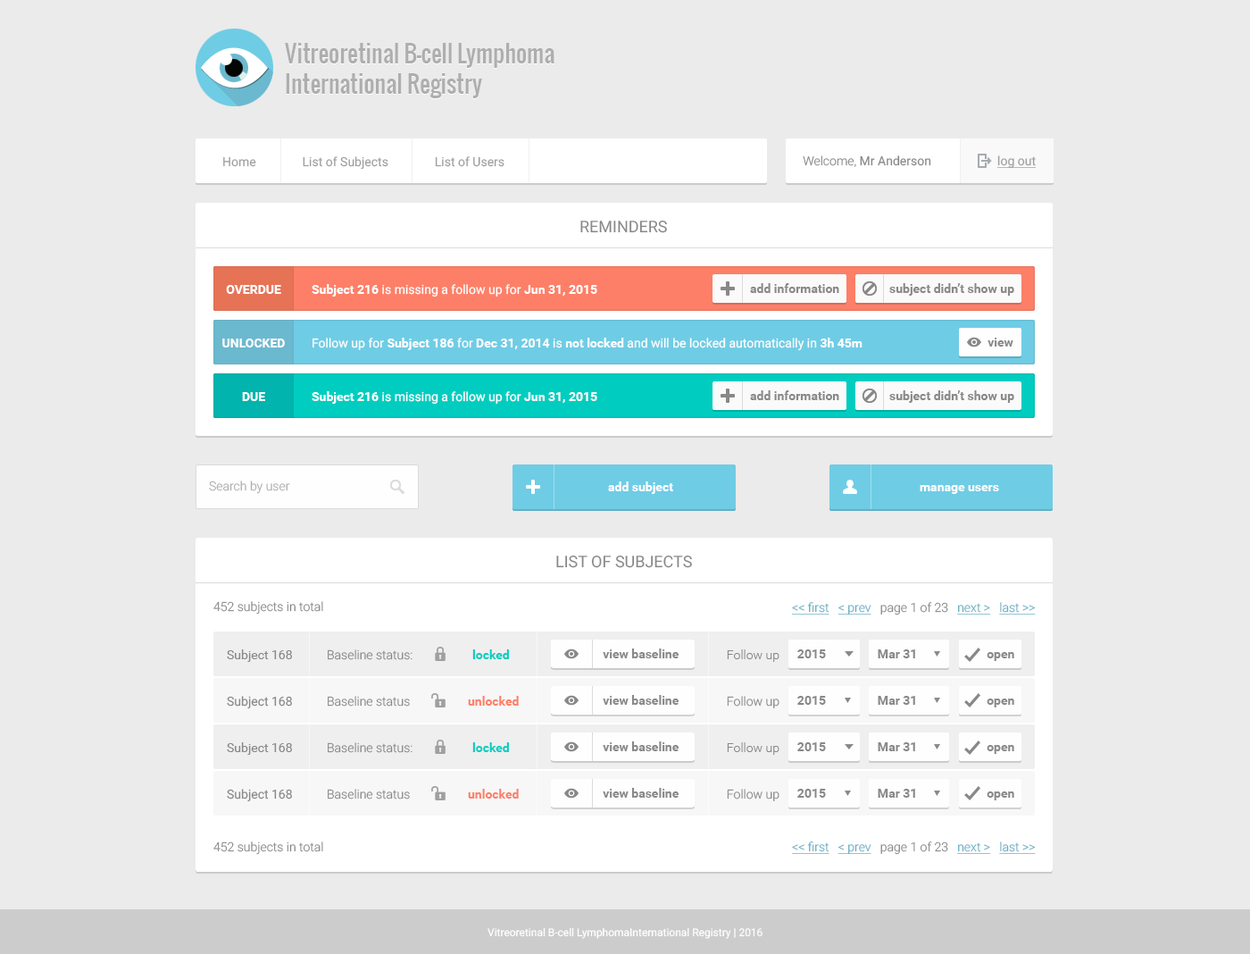
<style>
.page{position:relative;width:1250px;height:954px;background:#ebebeb}
.page>*{position:absolute;margin:0}
.t1{font:23.2px/30.4px "Oswald-Regular";color:#aeaeae}
.t2{font:12.5px "Roboto-Regular";color:#a0a0a0}
.t3{font:12.5px "Roboto-Regular";color:#888888}
.t4{font:12.5px "Roboto-Light";color:#888888}
.t5{font:12.5px "Roboto-Regular";color:#a0a0a0;text-decoration:underline}
.t6{font:16.1px "Roboto-Regular";color:#888888;text-transform:uppercase}
.t7{font:12.5px "Roboto-Bold";color:#ffffff;text-transform:uppercase}
.t8{font:12.5px "Roboto-Regular";color:#fefefe}
.t9{font:12.5px "Roboto-Bold";color:#fefefe}
.t10{font:12.5px "Roboto-Bold";color:#888888}
.t11{font:12.5px "Roboto-Light";color:#aeaeae}
.t12{font:12.5px "Roboto-Bold";color:#ffffff}
.t13{font:12.5px "Roboto-Light";color:#65afc4;text-decoration:underline}
.t14{font:12.5px "Roboto-Bold";color:#00cdc0}
.t15{font:12.5px "Roboto-Bold";color:#fd7f68}
.t16{font:10.7px "Roboto-Regular";color:#ffffff}
</style>
<div class="page">
<p class="t1" style="left:285px;top:44px;width:270px;height:55px">Vitreoretinal B-cell Lymphoma<br>International Registry</p>
<p class="t1" style="left:285px;top:43px;width:270px;height:55px">Vitreoretinal B-cell Lymphoma<br>International Registry</p>
<p class="t2" style="left:223px;top:156px;width:282px;height:14px">Home               List of Subjects               List of Users</p>
<p class="t3" style="left:803px;top:155px;width:128px;height:12px"><span class="t4">Welcome, </span>Mr Anderson</p>
<p class="t5" style="left:998px;top:155px;width:38px;height:14px">log out</p>
<p class="t6" style="left:580px;top:220px;width:87px;height:13px">REMINDERS</p>
<p class="t7" style="left:226px;top:285px;width:55px;height:9px">overdue</p>
<p class="t8" style="left:312px;top:284px;width:285px;height:13px"><span class="t9">Subject 216</span> is missing a follow up for<span class="t9"> Jun 31, 2015</span></p>
<p class="t10" style="left:750px;top:283px;width:89px;height:10px">add information</p>
<p class="t10" style="left:889px;top:283px;width:125px;height:13px">subject didn’t show up</p>
<p class="t7" style="left:222px;top:338px;width:63px;height:9px">Unlocked</p>
<p class="t8" style="left:313px;top:338px;width:550px;height:13px">Follow up for <span class="t9">Subject 186</span> for <span class="t9">Dec 31, 2014</span> is <span class="t9">not locked</span> and will be locked automatically in <span class="t9">3h 45m</span></p>
<p class="t10" style="left:988px;top:338px;width:26px;height:8px">view</p>
<p class="t7" style="left:242px;top:392px;width:23px;height:9px">Due</p>
<p class="t8" style="left:312px;top:391px;width:285px;height:14px"><span class="t9">Subject 216</span> is missing a follow up for<span class="t9"> Jun 31, 2015</span></p>
<p class="t10" style="left:750px;top:390px;width:89px;height:10px">add information</p>
<p class="t10" style="left:889px;top:390px;width:125px;height:13px">subject didn’t show up</p>
<p class="t11" style="left:209px;top:480px;width:81px;height:14px">Search by user</p>
<p class="t12" style="left:608px;top:481px;width:65px;height:13px">add subject</p>
<p class="t12" style="left:920px;top:485px;width:79px;height:9px">manage users</p>
<p class="t6" style="left:556px;top:555px;width:136px;height:13px">List of Subjects</p>
<p class="t4" style="left:213px;top:601px;width:110px;height:13px">452 subjects in total</p>
<p class="t13" style="left:792px;top:602px;width:244px;height:13px">&lt;&lt; first   &lt; prev   <span class="t4">page 1 of 23   </span>next &gt;   last &gt;&gt;</p>
<p class="t3" style="left:227px;top:649px;width:65px;height:13px">Subject 168</p>
<p class="t4" style="left:328px;top:649px;width:85px;height:11px">Baseline status:</p>
<p class="t14" style="left:472px;top:649px;width:37px;height:10px">locked</p>
<p class="t10" style="left:603px;top:648px;width:77px;height:10px">view baseline</p>
<p class="t4" style="left:727px;top:649px;width:53px;height:13px">Follow up</p>
<p class="t10" style="left:797px;top:649px;width:29px;height:9px">2015</p>
<p class="t10" style="left:878px;top:649px;width:37px;height:9px">Mar 31</p>
<p class="t10" style="left:987px;top:652px;width:27px;height:9px">open</p>
<p class="t3" style="left:227px;top:696px;width:65px;height:13px">Subject 168</p>
<p class="t4" style="left:328px;top:696px;width:82px;height:10px">Baseline status</p>
<p class="t15" style="left:468px;top:696px;width:51px;height:9px">unlocked</p>
<p class="t10" style="left:603px;top:695px;width:77px;height:10px">view baseline</p>
<p class="t4" style="left:727px;top:696px;width:53px;height:12px">Follow up</p>
<p class="t10" style="left:797px;top:696px;width:29px;height:9px">2015</p>
<p class="t10" style="left:878px;top:696px;width:37px;height:9px">Mar 31</p>
<p class="t10" style="left:987px;top:698px;width:27px;height:9px">open</p>
<p class="t3" style="left:227px;top:742px;width:65px;height:13px">Subject 168</p>
<p class="t4" style="left:328px;top:742px;width:85px;height:11px">Baseline status:</p>
<p class="t14" style="left:472px;top:742px;width:37px;height:10px">locked</p>
<p class="t10" style="left:603px;top:741px;width:77px;height:10px">view baseline</p>
<p class="t4" style="left:727px;top:742px;width:53px;height:13px">Follow up</p>
<p class="t10" style="left:797px;top:742px;width:29px;height:9px">2015</p>
<p class="t10" style="left:878px;top:742px;width:37px;height:9px">Mar 31</p>
<p class="t10" style="left:987px;top:745px;width:27px;height:9px">open</p>
<p class="t3" style="left:227px;top:789px;width:65px;height:13px">Subject 168</p>
<p class="t4" style="left:328px;top:789px;width:82px;height:10px">Baseline status</p>
<p class="t15" style="left:468px;top:789px;width:51px;height:9px">unlocked</p>
<p class="t10" style="left:603px;top:788px;width:77px;height:9px">view baseline</p>
<p class="t4" style="left:727px;top:789px;width:53px;height:12px">Follow up</p>
<p class="t10" style="left:797px;top:789px;width:29px;height:8px">2015</p>
<p class="t10" style="left:878px;top:789px;width:37px;height:8px">Mar 31</p>
<p class="t10" style="left:987px;top:791px;width:27px;height:9px">open</p>
<p class="t4" style="left:213px;top:841px;width:110px;height:14px">452 subjects in total</p>
<p class="t13" style="left:792px;top:841px;width:244px;height:14px">&lt;&lt; first   &lt; prev   <span class="t4">page 1 of 23   </span>next &gt;   last &gt;&gt;</p>
<p class="t16" style="left:488px;top:927px;width:275px;height:12px">Vitreoretinal B-cell LymphomaInternational Registry | 2016</p>
</div>
